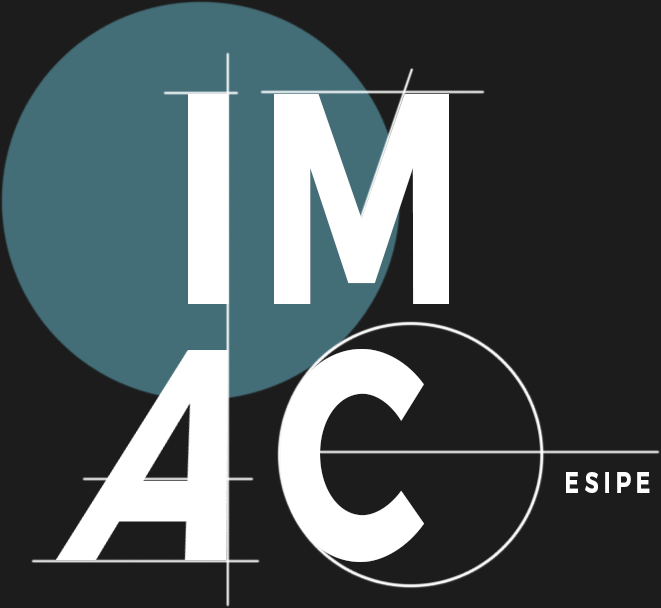
<style>
.page{position:relative;width:661px;height:608px;background:#1c1c1c}
.page>*{position:absolute;margin:0}
.t1{font:299.9px/256.4px "Montserrat-Bold";letter-spacing:0.06em;color:#ffffff;scale:0.76 1}
.t2{font:299.9px/256.4px "Montserrat-Bold";letter-spacing:0.24em;color:#ffffff;scale:0.73 1}
.t3{font:30px "Montserrat-Bold";letter-spacing:0.24em;color:#ffffff;scale:0.73 1}
</style>
<div class="page">
<p class="t1" style="left:188px;top:94px;width:261px;height:468px">IM<br><span class="t2"> C</span></p>
<p class="t3" style="left:566px;top:472px;width:84px;height:21px">ESIPE</p>
</div>
